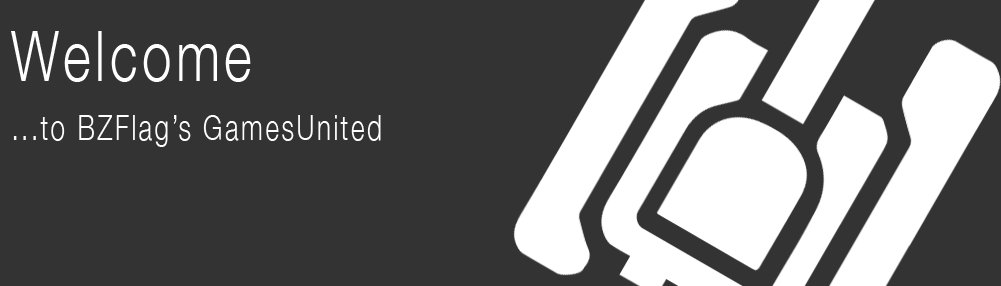
<style>
.page{position:relative;width:1001px;height:286px;background:#333333}
.page>*{position:absolute;margin:0}
.t1{font:35.1px/29.3px "HelveticaNeue-Light";letter-spacing:0.09em;color:#ffffff;scale:0.75 1}
.t2{font:70.3px/29.3px "HelveticaNeue-Light";letter-spacing:0.09em;color:#ffffff;scale:0.75 1}
</style>
<div class="page">
<p class="t1" style="left:11px;top:31px;width:370px;height:116px"><span class="t2">Welcome<br><br></span>...to BZFlag’s GamesUnited</p>
</div>
